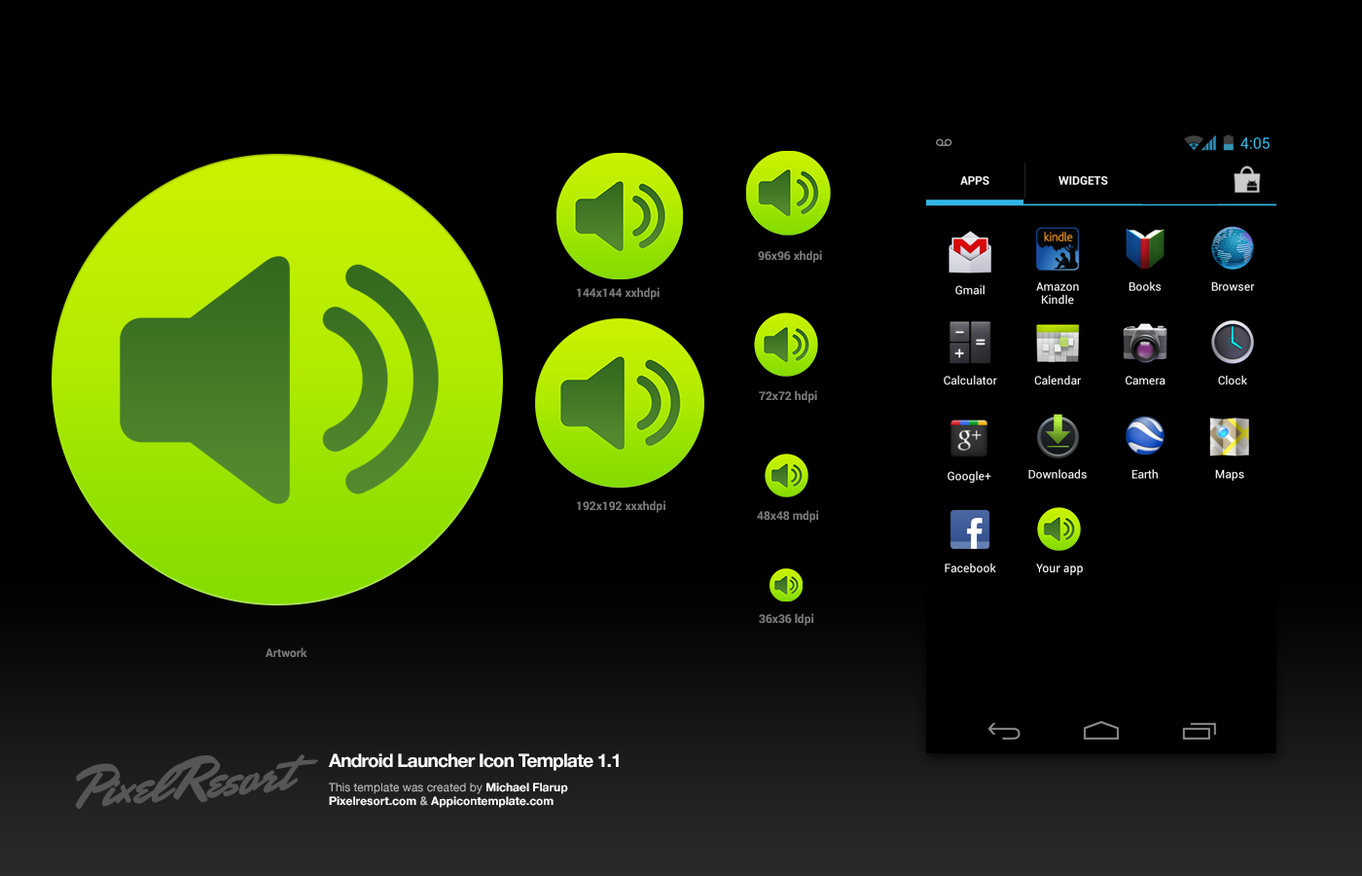
<style>
.page{position:relative;width:1362px;height:876px;background:#000000}
.page>*{position:absolute;margin:0}
.t1{font:11.7px "Roboto-Bold";color:#7a7a7a}
.t2{font:11.7px "DroidSans";color:#ffffff}
.t3{font:18.5px "HelveticaNeue-Bold";letter-spacing:-0.04em;color:#fafafa}
.t4{font:11.7px "HelveticaNeue-Bold";color:#f7f7f7}
.t5{font:11.7px "HelveticaNeue";color:#b9b9b9}
.t6{font:11.7px "HelveticaNeue-Bold";color:#b9b9b9}
</style>
<div class="page">
<p class="t1" style="left:758px;top:250px;width:64px;height:13px">96x96 xhdpi</p>
<p class="t1" style="left:577px;top:287px;width:83px;height:13px">144x144 xxhdpi</p>
<p class="t1" style="left:759px;top:390px;width:58px;height:13px">72x72 hdpi</p>
<p class="t1" style="left:577px;top:500px;width:88px;height:13px">192x192 xxxhdpi</p>
<p class="t1" style="left:757px;top:510px;width:61px;height:12px">48x48 mdpi</p>
<p class="t2" style="left:1036px;top:563px;width:47px;height:12px">Your app</p>
<p class="t1" style="left:759px;top:613px;width:54px;height:13px">36x36 ldpi</p>
<p class="t1" style="left:266px;top:647px;width:41px;height:10px">Artwork</p>
<p class="t3" style="left:329px;top:753px;width:290px;height:17px">Android Launcher Icon Template 1.1</p>
<p class="t4" style="left:329px;top:782px;width:239px;height:25px"><span class="t5">This template was created by </span>Michael Flarup<br>Pixelresort.com<span class="t6"> &amp; </span>Appicontemplate.com</p>
</div>
